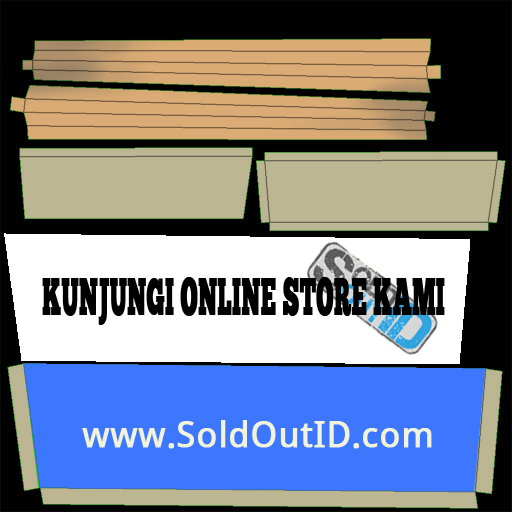
<style>
.page{position:relative;width:512px;height:512px;background:#000000}
.page>*{position:absolute;margin:0}
.t1{font:51.3px "ChunkFive";color:#000000;font-weight:bold;scale:0.45 1}
.t2{font:36px "DroidSans";color:#f2f3dc;font-weight:bold}
</style>
<div class="page">
<p class="t1" style="left:42px;top:277px;width:403px;height:48px">KUNJUNGI ONLINE STORE KAMI</p>
<p class="t2" style="left:82px;top:420px;width:350px;height:29px">www.SoldOutID.com</p>
</div>
